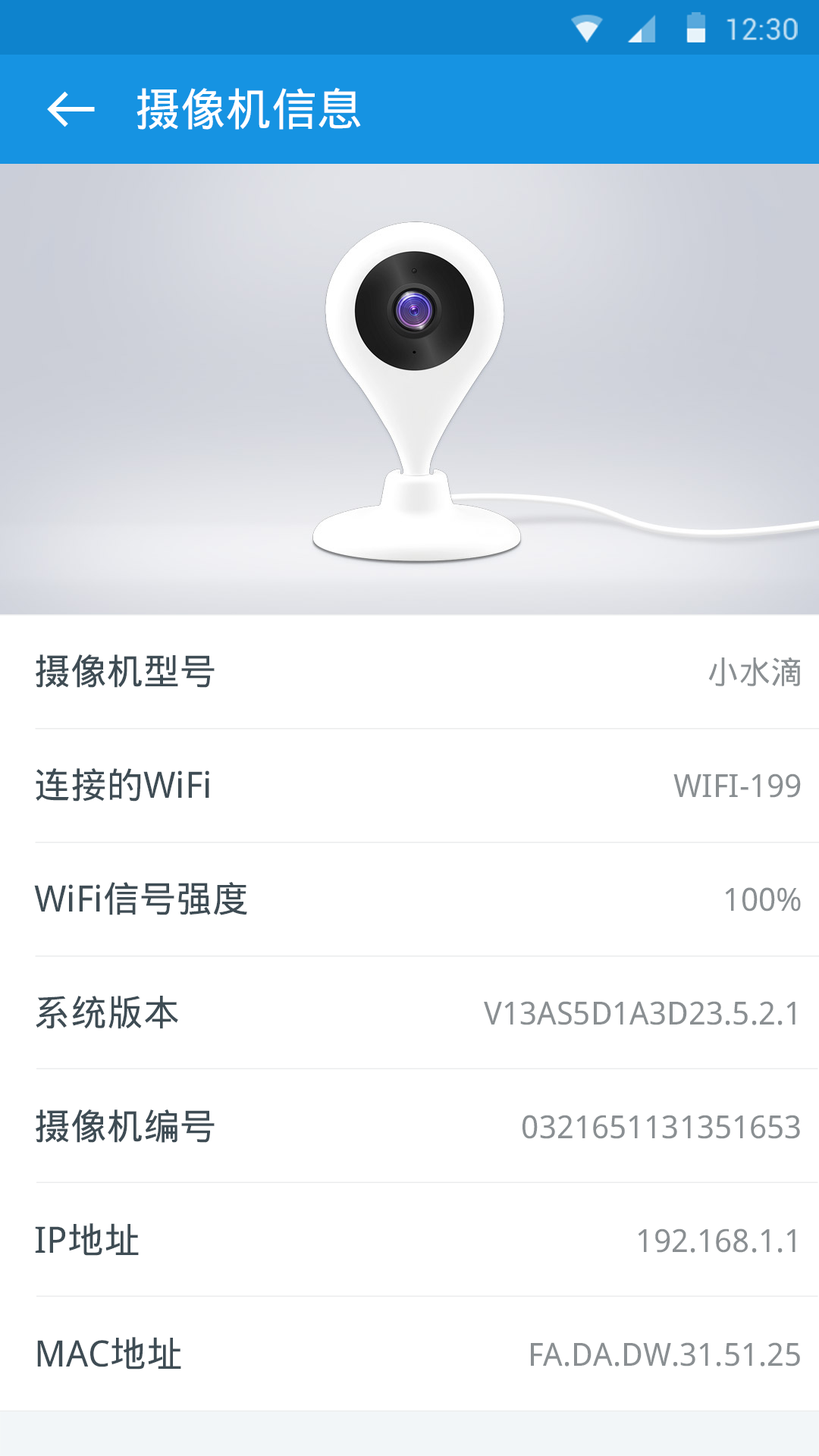
<style>
.page{position:relative;width:819px;height:1456px;background:#ffffff}
.page>*{position:absolute;margin:0}
.t1{font:45.5px "DroidSansFallback";color:#ffffff}
.t2{font:36.4px "DroidSansFallback";color:#3e4c54}
.t3{font:31.8px "DroidSansFallback";color:#8a8f92}
</style>
<div class="page">
<p class="t1" style="left:136px;top:87px;width:225px;height:43px">摄像机信息</p>
<p class="t2" style="left:36px;top:654px;width:179px;height:34px">摄像机型号</p>
<p class="t3" style="left:708px;top:657px;width:92px;height:29px">小水滴</p>
<p class="t2" style="left:36px;top:768px;width:173px;height:34px">连接的WiFi</p>
<p class="t3" style="left:673px;top:773px;width:128px;height:25px">WIFI-199</p>
<p class="t2" style="left:34px;top:882px;width:213px;height:33px">WiFi信号强度</p>
<p class="t3" style="left:725px;top:887px;width:76px;height:25px">100%</p>
<p class="t2" style="left:36px;top:996px;width:142px;height:33px">系统版本</p>
<p class="t3" style="left:484px;top:1001px;width:311px;height:24px">V13AS5D1A3D23.5.2.1</p>
<p class="t2" style="left:36px;top:1109px;width:179px;height:34px">摄像机编号</p>
<p class="t3" style="left:522px;top:1115px;width:278px;height:24px">0321651131351653</p>
<p class="t2" style="left:35px;top:1223px;width:104px;height:33px">IP地址</p>
<p class="t3" style="left:638px;top:1228px;width:157px;height:25px">192.168.1.1</p>
<p class="t2" style="left:37px;top:1337px;width:144px;height:33px">MAC地址</p>
<p class="t3" style="left:531px;top:1342px;width:269px;height:24px">FA.DA.DW.31.51.25</p>
</div>
